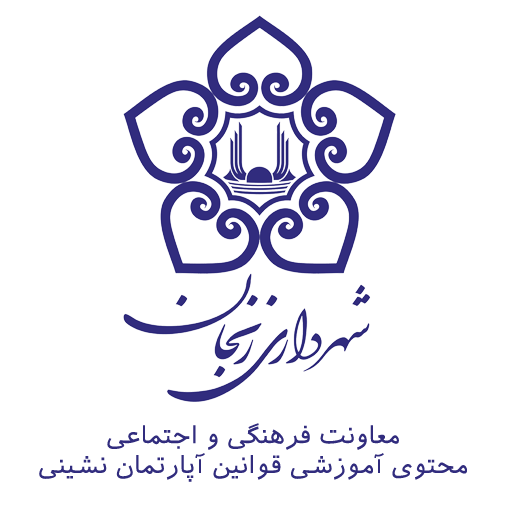
<style>
.page{position:relative;width:512px;height:512px;background:#ffffff}
.page>*{position:absolute;margin:0}
.t1{font:24.8px "IranianSans";color:#312c7e}
</style>
<div class="page">
<p class="t1" style="left:39px;top:423px;width:428px;height:59px;text-align:center">معاونت فرهنگی و اجتماعی<br>محتوی آموزشی قوانین آپارتمان نشینی</p>
</div>
